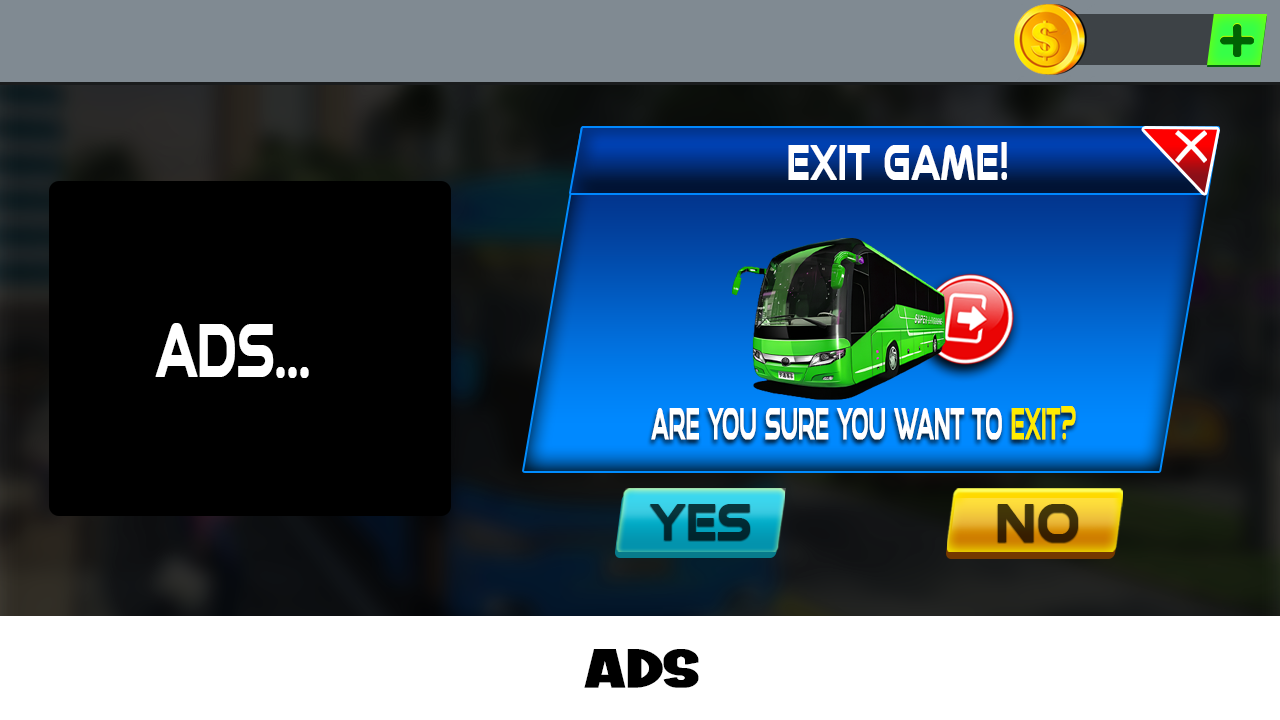
<style>
.page{position:relative;width:1280px;height:720px}
.page>*{position:absolute;margin:0}
.t1{font:49.3px "Speedy-Regular";letter-spacing:-0.025em;color:#ffffff;font-weight:bold;scale:0.68 1}
.t2{font:73.9px "Speedy-Regular";letter-spacing:-0.025em;color:#ffffff;font-weight:bold;scale:0.65 1}
.t3{font:43.9px "Speedy-Regular";letter-spacing:-0.025em;color:#ffffff;font-weight:bold;scale:0.45 1}
.t4{font:43.9px "Speedy-Regular";letter-spacing:-0.025em;color:#ffeb00;font-weight:bold;scale:0.45 1}
.t5{font:50.2px "Speedy-Regular";letter-spacing:-0.025em;color:#012d35;font-weight:bold;scale:0.87 1}
.t6{font:53px "Speedy-Regular";letter-spacing:-0.025em;color:#3d2d06;font-weight:bold;scale:0.95 1}
.t7{font:54.4px "ROYALMOSCOWRegular";letter-spacing:-0.025em;color:#000000;font-weight:bold;scale:1.45 1}
</style>
<div class="page">
<p class="t1" style="left:788px;top:142px;width:219px;height:38px">EXIT GAME!</p>
<p class="t2" style="left:155px;top:323px;width:154px;height:55px">ADS...</p>
<p class="t3" style="left:651px;top:406px;width:425px;height:34px">ARE YOU SURE YOU WANT TO <span class="t4">EXIT?</span></p>
<p class="t5" style="left:650px;top:504px;width:100px;height:36px">YES</p>
<p class="t6" style="left:997px;top:504px;width:81px;height:38px">NO</p>
<p class="t7" style="left:584px;top:649px;width:115px;height:39px">ADS</p>
</div>
